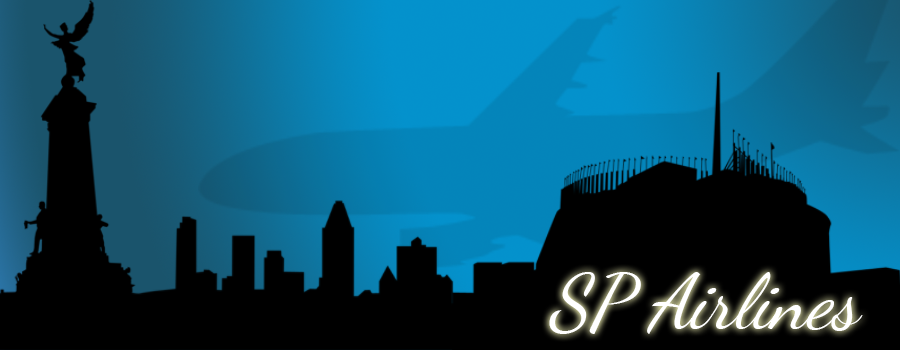
<style>
.page{position:relative;width:900px;height:350px;background:#000000}
.page>*{position:absolute;margin:0}
.t1{font:75.9px "DancingScript";color:#ffffff;font-style:italic}
</style>
<div class="page">
<p class="t1" style="left:549px;top:272px;width:314px;height:62px">SP Airlines</p>
</div>
